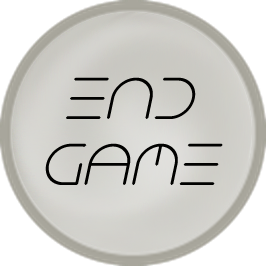
<style>
.page{position:relative;width:266px;height:266px}
.page>*{position:absolute;margin:0}
.t1{font:55px "NEONCLUBMUSIC-Italic";color:#010100}
</style>
<div class="page">
<p class="t1" style="left:45px;top:77px;width:178px;height:108px;text-align:center">end<br>Game</p>
</div>
